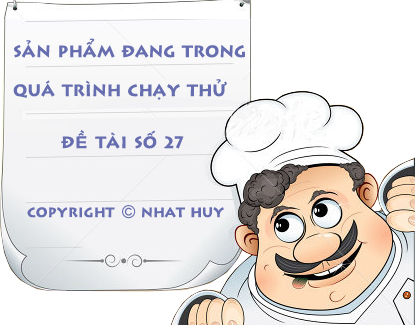
<style>
.page{position:relative;width:415px;height:325px;background:#ffffff}
.page>*{position:absolute;margin:0}
.t1{font:16.2px "VNI-Lithos";color:#676eb0}
.t2{font:13.3px "VNI-Lithos";color:#676eb0}
</style>
<div class="page">
<p class="t1" style="left:13px;top:38px;width:232px;height:62px">SAÛN PHAÅM ÑANG TRONG <br><br>QUAÙ TRÌNH CHAÏY THÖÛ</p>
<p class="t1" style="left:61px;top:130px;width:123px;height:19px">ñeà taøi soá 27</p>
<p class="t2" style="left:27px;top:207px;width:197px;height:11px">COPYRIGHT     NHAT HUY</p>
</div>
